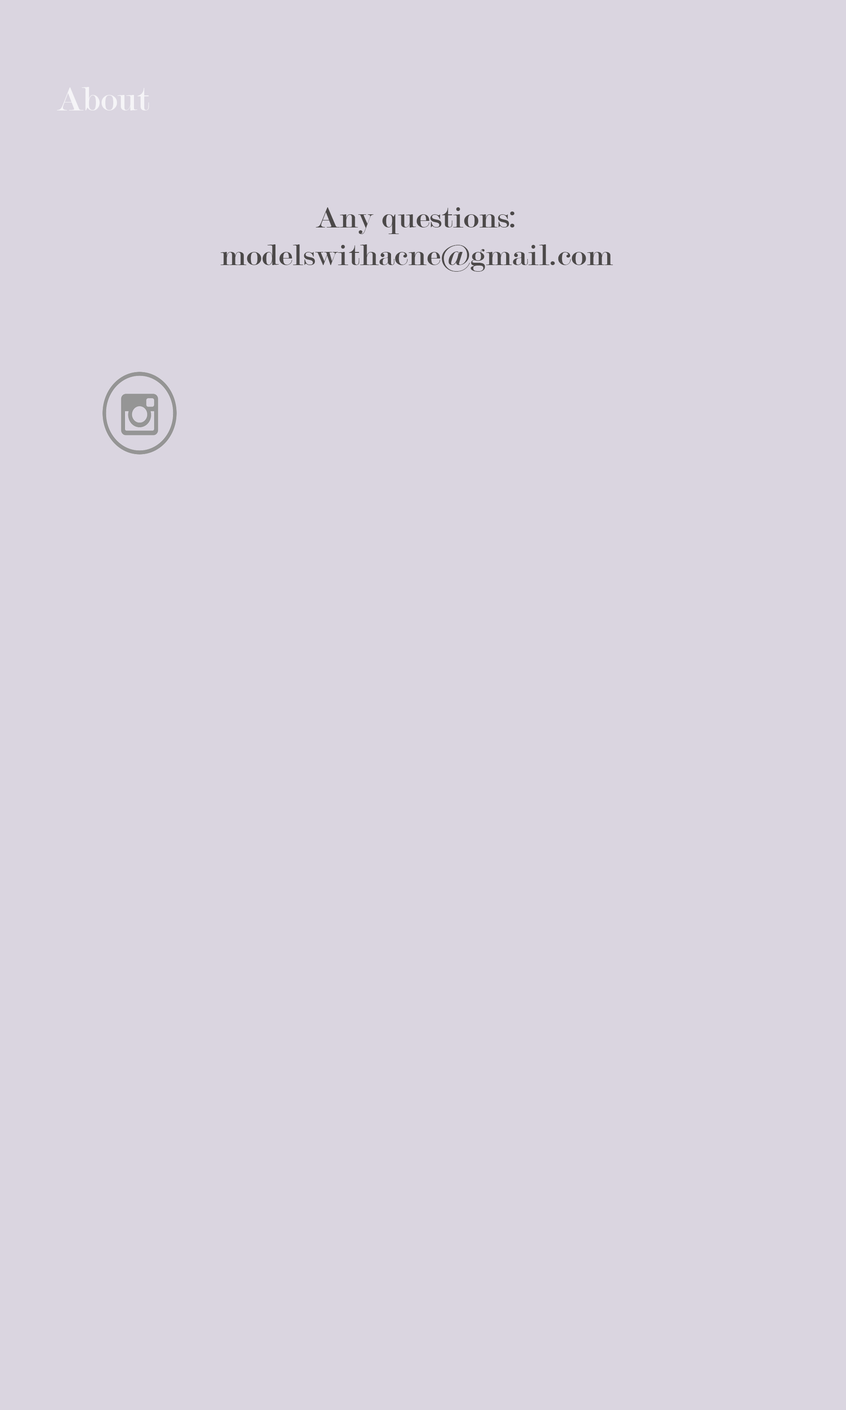
<style>
.page{position:relative;width:846px;height:1410px;background:#dad5e0}
.page>*{position:absolute;margin:0}
.t1{font:36.3px "Modern-Regular";color:#ffffff;scale:1.05 1}
.t2{font:31.3px "Modern-Regular";color:#4c4949;scale:1.1 1}
</style>
<div class="page">
<p class="t1" style="left:57px;top:87px;width:92px;height:23px;opacity:0.72">About</p>
<p class="t2" style="left:220px;top:207px;width:393px;height:65px;text-align:center">Any questions:<br>modelswithacne@gmail.com</p>
</div>
